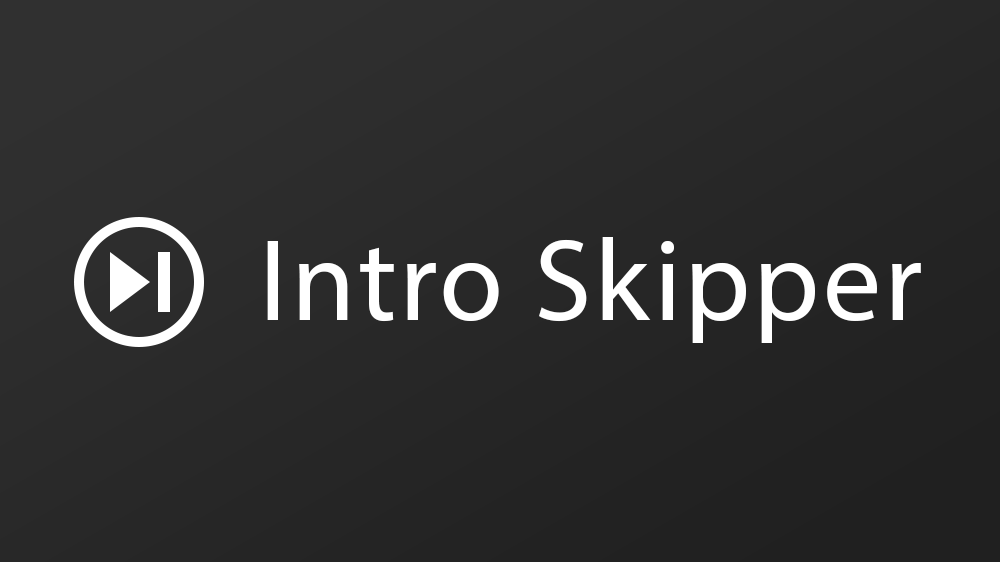
<style>
.page{position:relative;width:1000px;height:562px}
.page>*{position:absolute;margin:0}
.t1{font:116.7px "MyriadPro-Regular";letter-spacing:0.025em;color:#ffffff}
</style>
<div class="page">
<p class="t1" style="left:267px;top:237px;width:654px;height:106px">Intro Skipper</p>
</div>
